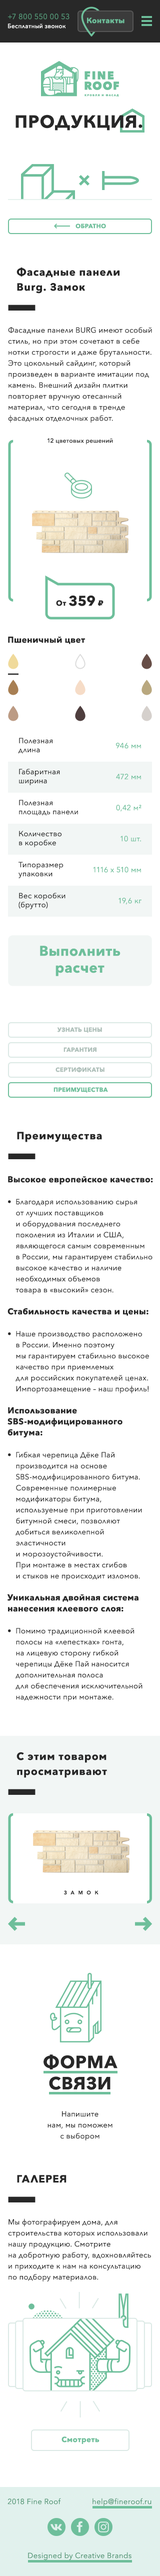
<style>
.page{position:relative;width:160px;height:2576px;background:#ffffff}
.page>*{position:absolute;margin:0}
.t1{font:7.5px "AvenirNext-Regular";letter-spacing:0.025em;color:#559777}
.t2{font:7.5px "AvenirNext-Bold";letter-spacing:0.025em;color:#6ebf9b}
.t3{font:6px "AvenirNext-Medium";letter-spacing:0.025em;color:#ffffff}
.t4{font:17.5px "AvenirNext-Bold";letter-spacing:0.05em;color:#282828;text-transform:uppercase}
.t5{font:6px "AvenirNext-Bold";letter-spacing:0.025em;color:#6ebf9b;text-transform:uppercase}
.t6{font:10.5px/15px "AvenirNext-Bold";letter-spacing:0.05em;color:#272727}
.t7{font:7.5px/11px "AvenirNext-Regular";letter-spacing:0.025em;color:#272727}
.t8{font:6px "AvenirNext-Medium";letter-spacing:0.025em;color:#272727}
.t9{font:14px "AvenirNext-Bold";letter-spacing:0.025em;color:#272727}
.t10{font:7.5px "AvenirNext-Bold";letter-spacing:0.025em;color:#272727}
.t11{font:7.5px "Geometria-ExtraBold";letter-spacing:0.025em;color:#272727}
.t12{font:8.5px "AvenirNext-Bold";letter-spacing:0.025em;color:#282828}
.t13{font:7.5px "AvenirNext-Regular";letter-spacing:0.025em;color:#272727}
.t14{font:7.5px "AvenirNext-Regular";letter-spacing:0.025em;color:#6ebf9b}
.t15{font:14px "AvenirNext-Bold";letter-spacing:0.025em;color:#6ebf9b}
.t16{font:6px "AvenirNext-Bold";letter-spacing:0.025em;color:#aebfb9;text-transform:uppercase}
.t17{font:10.5px "AvenirNext-Bold";letter-spacing:0.05em;color:#272727}
.t18{font:7.5px/11px "AvenirNext-Regular";letter-spacing:0.025em;color:#282828}
.t19{font:8.5px/11px "AvenirNext-Bold";letter-spacing:0.025em;color:#282828}
.t20{font:5px "AvenirNext-DemiBold";letter-spacing:0.765em;color:#272727}
.t21{font:17.5px/21.3px "AvenirNext-Bold";letter-spacing:0.05em;color:#282828;text-transform:uppercase}
.t22{font:10.5px "AvenirNext-Bold";letter-spacing:0.05em;color:#272727;text-transform:uppercase}
</style>
<div class="page">
<p class="t1" style="left:8px;top:14px;width:62px;height:6px">+7 800 550 00 53</p>
<p class="t2" style="left:87px;top:18px;width:38px;height:6px">Контакты</p>
<p class="t3" style="left:8px;top:24px;width:58px;height:5px">Бесплатный звонок</p>
<p class="t4" style="left:16px;top:115px;width:127px;height:16px">продукция.</p>
<p class="t5" style="left:76px;top:224px;width:30px;height:5px">обратно</p>
<p class="t6" style="left:17px;top:268px;width:103px;height:26px">Фасадные панели <br>Burg. Замок</p>
<p class="t7" style="left:8px;top:327px;width:144px;height:96px">Фасадные панели BURG имеют особый <br>стиль, но при этом сочетают в себе <br>нотки строгости и даже брутальности. <br>Это цокольный сайдинг, который <br>произведен в варианте имитации под <br>камень. Внешний дизайн плитки <br>повторяет вручную отесанный <br>материал, что сегодня в тренде <br>фасадных отделочных работ.</p>
<p class="t8" style="left:47px;top:438px;width:66px;height:7px">12 цветовых решений</p>
<p class="t9" style="left:56px;top:595px;width:48px;height:11px"><span class="t10">От </span>359 <span class="t11">₽</span></p>
<p class="t12" style="left:8px;top:637px;width:77px;height:7px">Пшеничный цвет</p>
<p class="t13" style="left:19px;top:738px;width:34px;height:16px">Полезная <br>длина</p>
<p class="t14" style="left:116px;top:743px;width:25px;height:6px">946 мм</p>
<p class="t13" style="left:19px;top:769px;width:41px;height:16px">Габаритная <br>ширина</p>
<p class="t14" style="left:116px;top:774px;width:25px;height:6px">472 мм</p>
<p class="t13" style="left:19px;top:800px;width:59px;height:16px">Полезная <br>площадь панели</p>
<p class="t14" style="left:116px;top:805px;width:26px;height:7px">0,42 м²</p>
<p class="t13" style="left:19px;top:831px;width:43px;height:16px">Количество <br>в коробке</p>
<p class="t14" style="left:121px;top:836px;width:20px;height:6px">10 шт.</p>
<p class="t13" style="left:19px;top:862px;width:45px;height:16px">Типоразмер <br>упаковки</p>
<p class="t14" style="left:93px;top:867px;width:48px;height:6px">1116 x 510 мм</p>
<p class="t13" style="left:19px;top:893px;width:47px;height:16px">Вес коробки <br>(брутто)</p>
<p class="t14" style="left:119px;top:898px;width:23px;height:7px">19,6 кг</p>
<p class="t15" style="left:40px;top:946px;width:81px;height:30px;text-align:center">Выполнить<br>расчет</p>
<p class="t16" style="left:57px;top:1027px;width:45px;height:6px">Узнать цены</p>
<p class="t16" style="left:64px;top:1047px;width:33px;height:5px">гарантия</p>
<p class="t16" style="left:56px;top:1067px;width:49px;height:6px">сертификаты</p>
<p class="t5" style="left:54px;top:1087px;width:54px;height:6px">преимущества</p>
<p class="t17" style="left:17px;top:1132px;width:85px;height:10px">Преимущества</p>
<p class="t18" style="left:7px;top:1176px;width:146px;height:525px"><span class="t19">Высокое европейское качество:<br><br></span>•  Благодаря использованию сырья <br>    от лучших поставщиков <br>    и оборудования последнего <br>    поколения из Италии и США, <br>    являющегося самым современным <br>    в России, мы гарантируем стабильно <br>    высокое качество и наличие <br>    необходимых объемов <br>    товара в «высокий» сезон.<br><br><span class="t19">Стабильность качества и цены:<br><br></span>•  Наше производство расположено <br>    в России. Именно поэтому <br>    мы гарантируем стабильно высокое <br>    качество при приемлемых <br>    для российских покупателей ценах. <br>    Импортозамещение – наш профиль!<br><br><span class="t19">Использование <br>SBS-модифицированного <br>битума:<br><br></span>•  Гибкая черепица Дёке Пай <br>    производится на основе <br>    SBS-модифицированного битума. <br>    Современные полимерные <br>    модификаторы битума, <br>    используемые при приготовлении <br>    битумной смеси, позволяют <br>    добиться великолепной <br>    эластичности <br>    и морозоустойчивости. <br>    При монтаже в местах сгибов <br>    и стыков не происходит изломов.<br><br><span class="t19">Уникальная двойная система <br>нанесения клеевого слоя:<br><br></span>•  Помимо традиционной клеевой <br>    полосы на «лепестках» гонта, <br>    на лицевую сторону гибкой <br>    черепицы Дёке Пай наносится <br>    дополнительная полоса <br>    для обеспечения исключительной <br>    надежности при монтаже.</p>
<p class="t6" style="left:17px;top:1752px;width:90px;height:26px">С этим товаром <br>просматривают</p>
<p class="t20" style="left:64px;top:1890px;width:35px;height:5px">ЗАМОК</p>
<p class="t21" style="left:44px;top:2054px;width:74px;height:36px;text-align:center">ФОРМА<br>СВЯЗИ</p>
<p class="t18" style="left:48px;top:2111px;width:65px;height:29px;text-align:center">Напишите<br>нам, мы поможем<br>с выбором</p>
<p class="t22" style="left:17px;top:2175px;width:50px;height:8px">ГАЛЕРЕЯ</p>
<p class="t7" style="left:8px;top:2218px;width:143px;height:63px">Мы фотографируем дома, для <br>строительства которых использовали <br>нашу продукцию. Смотрите <br>на добротную работу, вдохновляйтесь <br>и приходите к нам на консультацию <br>по подбору материалов.</p>
<p class="t2" style="left:62px;top:2436px;width:38px;height:8px">Смотреть</p>
<p class="t1" style="left:8px;top:2498px;width:53px;height:6px">2018 Fine Roof</p>
<p class="t1" style="left:93px;top:2498px;width:59px;height:8px">help@fineroof.ru</p>
<p class="t1" style="left:28px;top:2552px;width:104px;height:8px">Designed by Creative Brands</p>
</div>
